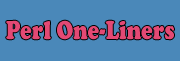
<style>
.page{position:relative;width:180px;height:61px;background:#4a88b9}
.page>*{position:absolute;margin:0}
.t1{font:27px "CooperBlack";color:#e34974;scale:0.8 1}
</style>
<div class="page">
<p class="t1" style="left:6px;top:20px;width:168px;height:20px">Perl One-Liners</p>
</div>
